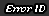
<style>
.page{position:relative;width:49px;height:16px;background:#333333}
.page>*{position:absolute;margin:0}
.t1{font:14px "Vijaya-Bold";color:#ffffff}
</style>
<div class="page">
<p class="t1" style="left:6px;top:5px;width:39px;height:7px">Error ID</p>
</div>
